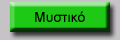
<style>
.page{position:relative;width:120px;height:40px;background:#1ec915}
.page>*{position:absolute;margin:0}
.t1{font:14px "ArialMT";color:#000000}
</style>
<div class="page">
<p class="t1" style="left:35px;top:11px;width:50px;height:11px">Μυστικό</p>
</div>
